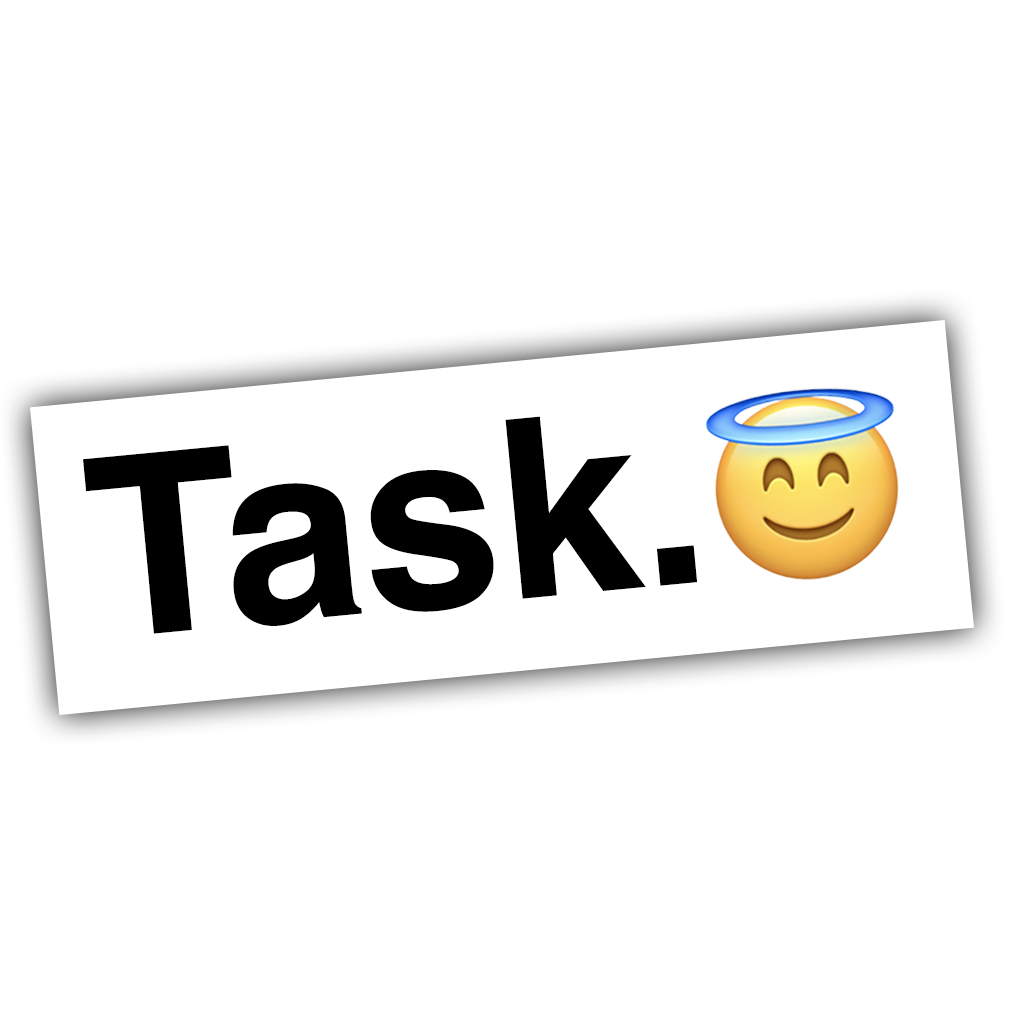
<style>
.page{position:relative;width:1024px;height:1024px;background:#ffffff}
.page>*{position:absolute;margin:0}
.t1{font:250px "Helvetica-Bold";color:#000000}
</style>
<div class="page">
<p class="t1" style="left:83px;top:416px;width:614px;height:218px;rotate:-5deg">Task.</p>
</div>
